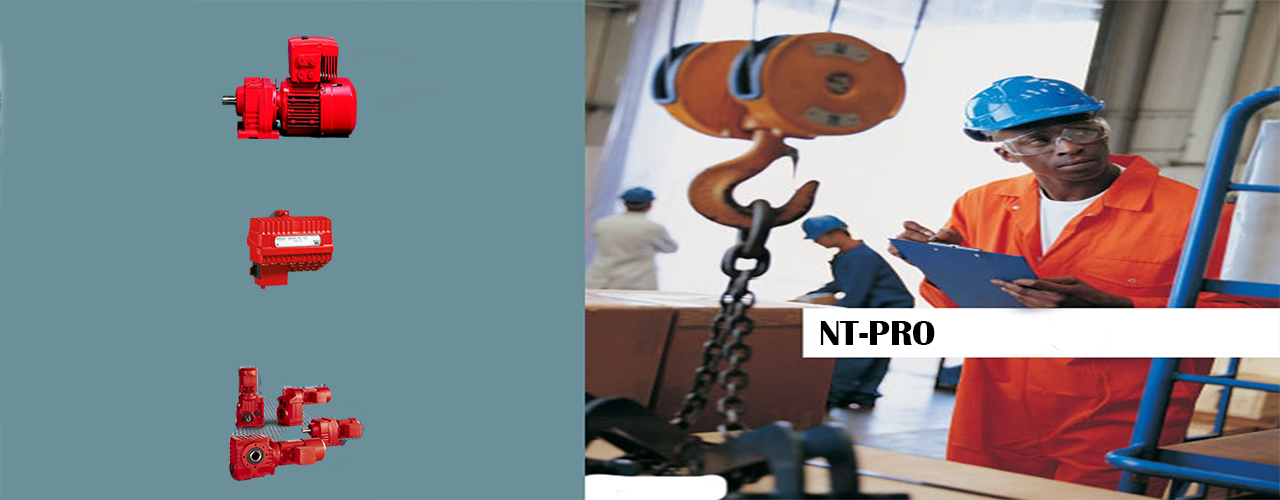
<style>
.page{position:relative;width:1280px;height:500px;background:#6b9099}
.page>*{position:absolute;margin:0}
.t1{font:36px "BritannicBold";color:#000000}
</style>
<div class="page">
<p class="t1" style="left:820px;top:321px;width:115px;height:24px">NT-PRO</p>
</div>
